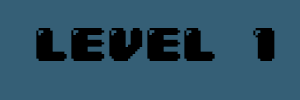
<style>
.page{position:relative;width:300px;height:100px;background:#355f76}
.page>*{position:absolute;margin:0}
.t1{font:40px "04b30";color:#000000}
</style>
<div class="page">
<p class="t1" style="left:36px;top:28px;width:239px;height:33px">LEVEL 1</p>
</div>
